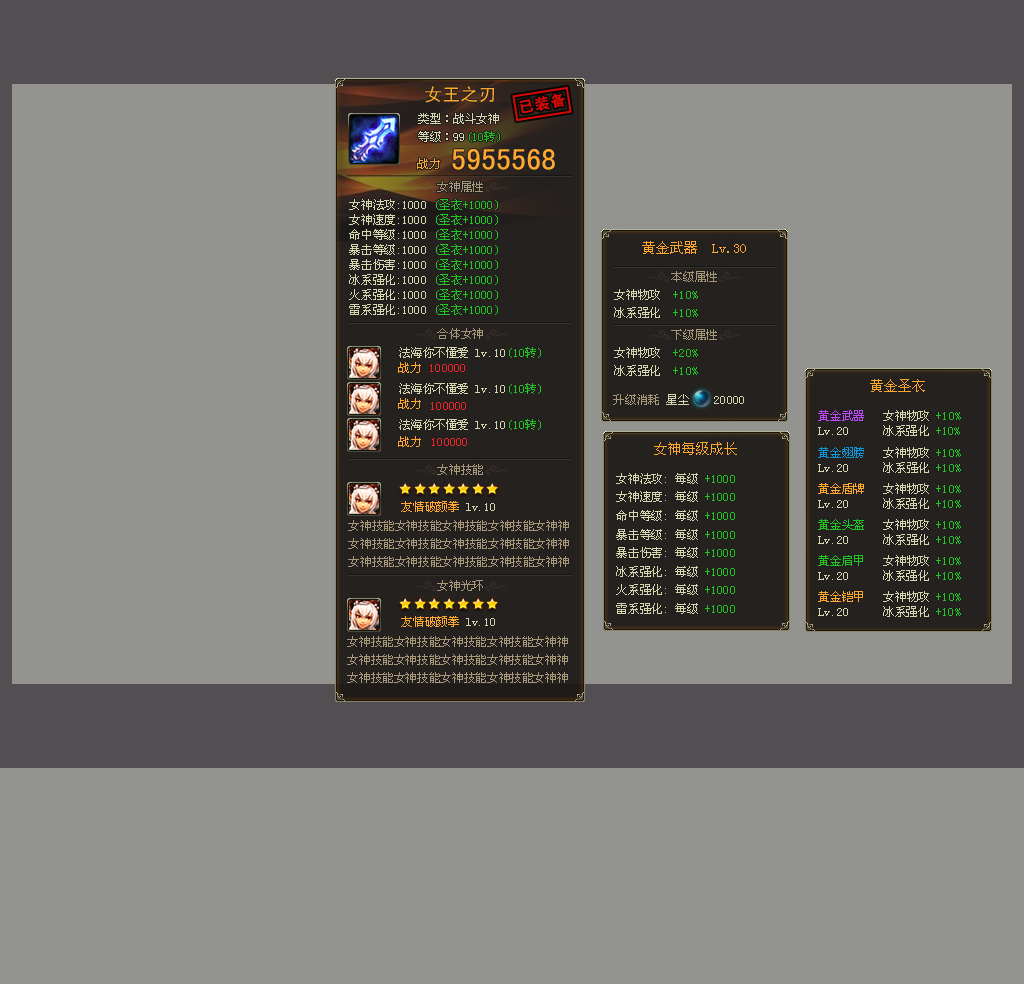
<style>
.page{position:relative;width:1024px;height:1000px;background:#939390}
.page>*{position:absolute;margin:0}
.t1{font:18px "SimHei";color:#ffa72e}
.t2{font:15px "SimHei";letter-spacing:0.05em;color:#d60806;font-weight:bold}
.t3{font:12px "SimSun";color:#d8d6af}
.t4{font:12px "SimSun";color:#23c423}
.t5{font:30px "SimHei";color:#ffa72e}
.t6{font:12px "SimSun";color:#ffa72e}
.t7{font:12px "SimSun";color:#a99877}
.t8{font:12px/15px "SimSun";color:#d8d6af}
.t9{font:12px/15px "SimSun";color:#23c423}
.t10{font:14px "SimSun";color:#ffa72e}
.t11{font:12px/18.6px "SimSun";color:#d8d6af}
.t12{font:12px/18.6px "SimSun";color:#23c423}
.t13{font:12px "SimSun";color:#f02528}
.t14{font:12px "SimSun";color:#be4bf9}
.t15{font:12px "SimSun";color:#1096d5}
.t16{font:12px/18px "SimSun";color:#a99877}
</style>
<div class="page">
<p class="t1" style="left:425px;top:86px;width:70px;height:17px">女王之刃</p>
<p class="t2" style="left:519px;top:93px;width:46px;height:21px;rotate:-11deg">已装备</p>
<p class="t3" style="left:418px;top:113px;width:81px;height:11px">类型：战斗女神</p>
<p class="t3" style="left:418px;top:131px;width:82px;height:11px">等级：99<span class="t4">(10转)</span></p>
<p class="t5" style="left:452px;top:149px;width:103px;height:21px">5955568</p>
<p class="t6" style="left:417px;top:158px;width:23px;height:11px">战力</p>
<p class="t7" style="left:437px;top:181px;width:46px;height:11px">女神属性</p>
<p class="t8" style="left:349px;top:199px;width:149px;height:116px">女神法攻:1000 <span class="t9">(圣衣+1000)<br></span>女神速度:1000 <span class="t9">(圣衣+1000)<br></span>命中等级:1000 <span class="t9">(圣衣+1000)<br></span>暴击等级:1000 <span class="t9">(圣衣+1000)<br></span>暴击伤害:1000 <span class="t9">(圣衣+1000)<br></span>冰系强化:1000 <span class="t9">(圣衣+1000)<br></span>火系强化:1000 <span class="t9">(圣衣+1000)<br></span>雷系强化:1000 <span class="t9">(圣衣+1000)</span></p>
<p class="t10" style="left:642px;top:241px;width:104px;height:13px">黄金武器  Lv.30</p>
<p class="t7" style="left:671px;top:271px;width:46px;height:11px">本级属性</p>
<p class="t3" style="left:614px;top:289px;width:84px;height:11px">女神物攻  <span class="t4">+10%</span></p>
<p class="t3" style="left:614px;top:307px;width:84px;height:11px">冰系强化  <span class="t4">+10%</span></p>
<p class="t7" style="left:437px;top:328px;width:46px;height:11px">合体女神</p>
<p class="t7" style="left:671px;top:329px;width:46px;height:11px">下级属性</p>
<p class="t3" style="left:399px;top:347px;width:142px;height:11px">法海你不懂爱 lv.10<span class="t4">(10转)</span></p>
<p class="t11" style="left:614px;top:347px;width:84px;height:29px">女神物攻  <span class="t12">+20%<br></span>冰系强化  <span class="t12">+10%</span></p>
<p class="t6" style="left:398px;top:362px;width:23px;height:11px">战力</p>
<p class="t13" style="left:430px;top:364px;width:35px;height:8px">100000</p>
<p class="t3" style="left:399px;top:383px;width:142px;height:11px">法海你不懂爱 lv.10<span class="t4">(10转)</span></p>
<p class="t10" style="left:870px;top:379px;width:55px;height:13px">黄金圣衣</p>
<p class="t6" style="left:398px;top:398px;width:23px;height:11px">战力</p>
<p class="t3" style="left:613px;top:394px;width:131px;height:11px"><span class="t7">升级消耗 </span>星尘    20000</p>
<p class="t13" style="left:431px;top:402px;width:35px;height:8px">100000</p>
<p class="t14" style="left:818px;top:410px;width:143px;height:11px">黄金武器<span class="t3">   女神物攻 </span><span class="t4">+10%</span></p>
<p class="t3" style="left:399px;top:419px;width:142px;height:11px">法海你不懂爱 lv.10<span class="t4">(10转)</span></p>
<p class="t3" style="left:818px;top:425px;width:142px;height:11px">Lv.20     冰系强化 <span class="t4">+10%</span></p>
<p class="t6" style="left:398px;top:436px;width:23px;height:11px">战力</p>
<p class="t13" style="left:432px;top:438px;width:35px;height:8px">100000</p>
<p class="t10" style="left:654px;top:442px;width:83px;height:13px">女神每级成长</p>
<p class="t15" style="left:818px;top:447px;width:143px;height:11px">黄金翅膀<span class="t3">   女神物攻 </span><span class="t4">+10%</span></p>
<p class="t3" style="left:818px;top:462px;width:143px;height:11px">Lv.20     冰系强化 <span class="t4">+10%</span></p>
<p class="t7" style="left:437px;top:464px;width:46px;height:11px">女神技能</p>
<p class="t11" style="left:616px;top:473px;width:119px;height:141px">女神法攻: 每级 <span class="t12">+1000<br></span>女神速度: 每级 <span class="t12">+1000<br></span>命中等级: 每级 <span class="t12">+1000<br></span>暴击等级: 每级 <span class="t12">+1000<br></span>暴击伤害: 每级 <span class="t12">+1000<br></span>冰系强化: 每级 <span class="t12">+1000<br></span>火系强化: 每级 <span class="t12">+1000<br></span>雷系强化: 每级 <span class="t12">+1000</span></p>
<p class="t6" style="left:818px;top:483px;width:143px;height:11px">黄金盾牌<span class="t3">   女神物攻 </span><span class="t4">+10%</span></p>
<p class="t6" style="left:401px;top:501px;width:94px;height:11px">友情破颜拳 <span class="t3">lv.10</span></p>
<p class="t3" style="left:818px;top:498px;width:143px;height:11px">Lv.20     冰系强化 <span class="t4">+10%</span></p>
<p class="t16" style="left:348px;top:520px;width:221px;height:47px">女神技能女神技能女神技能女神技能女神神<br>女神技能女神技能女神技能女神技能女神神<br>女神技能女神技能女神技能女神技能女神神</p>
<p class="t4" style="left:818px;top:519px;width:143px;height:11px">黄金头盔<span class="t3">   女神物攻 </span>+10%</p>
<p class="t3" style="left:818px;top:534px;width:143px;height:11px">Lv.20     冰系强化 <span class="t4">+10%</span></p>
<p class="t4" style="left:818px;top:555px;width:143px;height:11px">黄金肩甲<span class="t3">   女神物攻 </span>+10%</p>
<p class="t7" style="left:437px;top:580px;width:46px;height:11px">女神光环</p>
<p class="t3" style="left:818px;top:570px;width:143px;height:11px">Lv.20     冰系强化 <span class="t4">+10%</span></p>
<p class="t6" style="left:818px;top:591px;width:143px;height:11px">黄金铠甲<span class="t3">   女神物攻 </span><span class="t4">+10%</span></p>
<p class="t3" style="left:818px;top:606px;width:143px;height:11px">Lv.20     冰系强化 <span class="t4">+10%</span></p>
<p class="t6" style="left:401px;top:616px;width:94px;height:11px">友情破颜拳 <span class="t3">lv.10</span></p>
<p class="t16" style="left:347px;top:636px;width:221px;height:47px">女神技能女神技能女神技能女神技能女神神<br>女神技能女神技能女神技能女神技能女神神<br>女神技能女神技能女神技能女神技能女神神</p>
</div>
